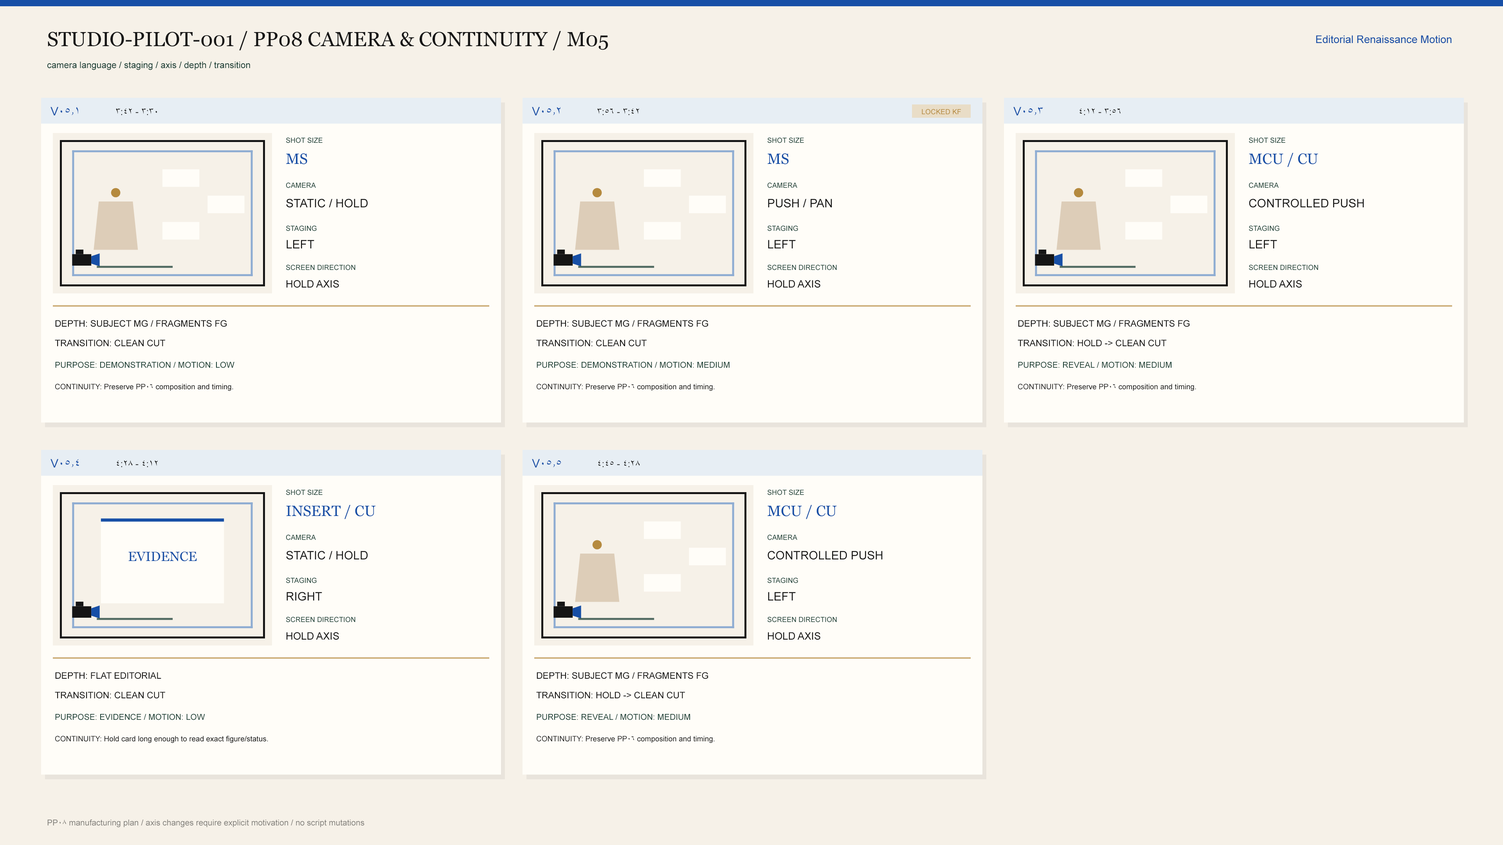
<style>
.page{position:relative;width:1503px;height:845px;background:#f6f1e8}
.page>*{position:absolute;margin:0}
.t1{font:20.3px "Georgia";color:#151515}
.t2{font:10.6px "ArialMT";color:#174fa6}
.t3{font:9px "ArialMT";color:#173c32}
.t4{font:11.7px "ArialMT";color:#174fa6}
.t5{font:9.4px "ArialMT";color:#151515}
.t6{font:7px "ArialMT";color:#b58a3e}
.t7{font:7px "ArialMT";color:#173c32}
.t8{font:14.9px "Georgia";color:#174fa6}
.t9{font:21.5px "ArialMT";color:#b58a3e}
.t10{font:11.7px "ArialMT";color:#151515}
.t11{font:10.2px "ArialMT";color:#151515}
.t12{font:9px "ArialMT";color:#151515}
.t13{font:8.2px "ArialMT";color:#173c32}
.t14{font:7.4px "ArialMT";color:#151515}
.t15{font:13.3px "Georgia";color:#174fa6}
.t16{font:8.2px "ArialMT";color:#817f7a}
</style>
<div class="page">
<p class="t1" style="left:48px;top:31px;width:560px;height:19px">STUDIO-PILOT-001 / PP08 CAMERA &amp; CONTINUITY / M05</p>
<p class="t2" style="left:1316px;top:35px;width:135px;height:8px">Editorial Renaissance Motion</p>
<p class="t3" style="left:47px;top:61px;width:203px;height:9px">camera language / staging / axis / depth / transition</p>
<p class="t4" style="left:50px;top:107px;width:28px;height:8px">V05.1</p>
<p class="t5" style="left:116px;top:108px;width:41px;height:7px">3:30 - 3:42</p>
<p class="t4" style="left:532px;top:107px;width:28px;height:8px">V05.2</p>
<p class="t5" style="left:597px;top:108px;width:42px;height:7px">3:42 - 3:56</p>
<p class="t6" style="left:922px;top:109px;width:39px;height:6px">LOCKED KF</p>
<p class="t4" style="left:1013px;top:107px;width:29px;height:8px">V05.3</p>
<p class="t5" style="left:1079px;top:108px;width:41px;height:7px">3:56 - 4:12</p>
<p class="t7" style="left:286px;top:137px;width:36px;height:6px">SHOT SIZE</p>
<p class="t7" style="left:767px;top:137px;width:37px;height:6px">SHOT SIZE</p>
<p class="t7" style="left:1249px;top:137px;width:36px;height:6px">SHOT SIZE</p>
<p class="t8" style="left:286px;top:153px;width:21px;height:11px">MS</p>
<p class="t8" style="left:767px;top:153px;width:21px;height:11px">MS</p>
<p class="t8" style="left:1249px;top:153px;width:69px;height:14px">MCU / CU</p>
<p class="t7" style="left:286px;top:182px;width:30px;height:6px">CAMERA</p>
<p class="t7" style="left:767px;top:182px;width:30px;height:6px">CAMERA</p>
<p class="t7" style="left:1249px;top:182px;width:29px;height:6px">CAMERA</p>
<p class="t9" style="left:111px;top:188px;width:10px;height:10px">●</p>
<p class="t9" style="left:592px;top:188px;width:10px;height:10px">●</p>
<p class="t9" style="left:1073px;top:188px;width:10px;height:10px">●</p>
<p class="t10" style="left:286px;top:199px;width:82px;height:9px">STATIC / HOLD</p>
<p class="t10" style="left:768px;top:199px;width:64px;height:9px">PUSH / PAN</p>
<p class="t10" style="left:1249px;top:199px;width:115px;height:9px">CONTROLLED PUSH</p>
<p class="t7" style="left:286px;top:225px;width:31px;height:6px">STAGING</p>
<p class="t7" style="left:767px;top:225px;width:31px;height:6px">STAGING</p>
<p class="t7" style="left:1249px;top:225px;width:30px;height:6px">STAGING</p>
<p class="t10" style="left:286px;top:240px;width:28px;height:8px">LEFT</p>
<p class="t10" style="left:768px;top:240px;width:28px;height:8px">LEFT</p>
<p class="t10" style="left:1249px;top:240px;width:28px;height:8px">LEFT</p>
<p class="t7" style="left:286px;top:265px;width:69px;height:5px">SCREEN DIRECTION</p>
<p class="t7" style="left:767px;top:265px;width:70px;height:5px">SCREEN DIRECTION</p>
<p class="t7" style="left:1249px;top:265px;width:69px;height:5px">SCREEN DIRECTION</p>
<p class="t11" style="left:286px;top:280px;width:53px;height:8px">HOLD AXIS</p>
<p class="t11" style="left:768px;top:280px;width:52px;height:8px">HOLD AXIS</p>
<p class="t11" style="left:1249px;top:280px;width:52px;height:8px">HOLD AXIS</p>
<p class="t12" style="left:55px;top:320px;width:172px;height:7px">DEPTH: SUBJECT MG / FRAGMENTS FG</p>
<p class="t12" style="left:536px;top:320px;width:172px;height:7px">DEPTH: SUBJECT MG / FRAGMENTS FG</p>
<p class="t12" style="left:1018px;top:320px;width:171px;height:7px">DEPTH: SUBJECT MG / FRAGMENTS FG</p>
<p class="t12" style="left:55px;top:340px;width:110px;height:7px">TRANSITION: CLEAN CUT</p>
<p class="t12" style="left:536px;top:340px;width:110px;height:7px">TRANSITION: CLEAN CUT</p>
<p class="t12" style="left:1017px;top:340px;width:149px;height:7px">TRANSITION: HOLD -&gt; CLEAN CUT</p>
<p class="t13" style="left:55px;top:362px;width:179px;height:6px">PURPOSE: DEMONSTRATION / MOTION: LOW</p>
<p class="t13" style="left:536px;top:362px;width:193px;height:6px">PURPOSE: DEMONSTRATION / MOTION: MEDIUM</p>
<p class="t13" style="left:1018px;top:362px;width:153px;height:6px">PURPOSE: REVEAL / MOTION: MEDIUM</p>
<p class="t14" style="left:55px;top:384px;width:178px;height:7px">CONTINUITY: Preserve PP06 composition and timing.</p>
<p class="t14" style="left:536px;top:384px;width:179px;height:7px">CONTINUITY: Preserve PP06 composition and timing.</p>
<p class="t14" style="left:1018px;top:384px;width:178px;height:7px">CONTINUITY: Preserve PP06 composition and timing.</p>
<p class="t4" style="left:50px;top:459px;width:29px;height:9px">V05.4</p>
<p class="t5" style="left:117px;top:460px;width:41px;height:7px">4:12 - 4:28</p>
<p class="t4" style="left:532px;top:459px;width:29px;height:9px">V05.5</p>
<p class="t5" style="left:598px;top:460px;width:42px;height:7px">4:28 - 4:45</p>
<p class="t7" style="left:286px;top:490px;width:36px;height:5px">SHOT SIZE</p>
<p class="t7" style="left:767px;top:490px;width:37px;height:5px">SHOT SIZE</p>
<p class="t8" style="left:286px;top:505px;width:90px;height:14px">INSERT / CU</p>
<p class="t8" style="left:767px;top:505px;width:70px;height:14px">MCU / CU</p>
<p class="t7" style="left:286px;top:535px;width:30px;height:5px">CAMERA</p>
<p class="t9" style="left:592px;top:540px;width:10px;height:10px">●</p>
<p class="t7" style="left:767px;top:535px;width:30px;height:5px">CAMERA</p>
<p class="t15" style="left:128px;top:552px;width:69px;height:10px">EVIDENCE</p>
<p class="t10" style="left:286px;top:551px;width:82px;height:9px">STATIC / HOLD</p>
<p class="t10" style="left:767px;top:551px;width:115px;height:9px">CONTROLLED PUSH</p>
<p class="t7" style="left:286px;top:578px;width:31px;height:5px">STAGING</p>
<p class="t7" style="left:767px;top:578px;width:31px;height:5px">STAGING</p>
<p class="t10" style="left:286px;top:592px;width:36px;height:9px">RIGHT</p>
<p class="t10" style="left:768px;top:592px;width:28px;height:9px">LEFT</p>
<p class="t7" style="left:286px;top:617px;width:69px;height:6px">SCREEN DIRECTION</p>
<p class="t7" style="left:767px;top:617px;width:70px;height:6px">SCREEN DIRECTION</p>
<p class="t11" style="left:286px;top:632px;width:53px;height:8px">HOLD AXIS</p>
<p class="t11" style="left:768px;top:632px;width:52px;height:8px">HOLD AXIS</p>
<p class="t12" style="left:55px;top:672px;width:106px;height:7px">DEPTH: FLAT EDITORIAL</p>
<p class="t12" style="left:536px;top:672px;width:172px;height:7px">DEPTH: SUBJECT MG / FRAGMENTS FG</p>
<p class="t12" style="left:55px;top:692px;width:110px;height:7px">TRANSITION: CLEAN CUT</p>
<p class="t12" style="left:536px;top:692px;width:149px;height:7px">TRANSITION: HOLD -&gt; CLEAN CUT</p>
<p class="t13" style="left:55px;top:714px;width:150px;height:6px">PURPOSE: EVIDENCE / MOTION: LOW</p>
<p class="t13" style="left:536px;top:714px;width:154px;height:6px">PURPOSE: REVEAL / MOTION: MEDIUM</p>
<p class="t14" style="left:55px;top:736px;width:213px;height:7px">CONTINUITY: Hold card long enough to read exact figure/status.</p>
<p class="t14" style="left:536px;top:736px;width:179px;height:7px">CONTINUITY: Preserve PP06 composition and timing.</p>
<p class="t16" style="left:47px;top:819px;width:317px;height:9px">PP08 manufacturing plan / axis changes require explicit motivation / no script mutations</p>
</div>
